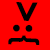
<style>
.page{position:relative;width:50px;height:50px;background:#ff0000}
.page>*{position:absolute;margin:0}
.t1{font:36px "URWBookman-Demi";color:#000000}
</style>
<div class="page">
<p class="t1" style="left:8px;top:2px;width:32px;height:43px;rotate:91deg">&gt;:{</p>
</div>
